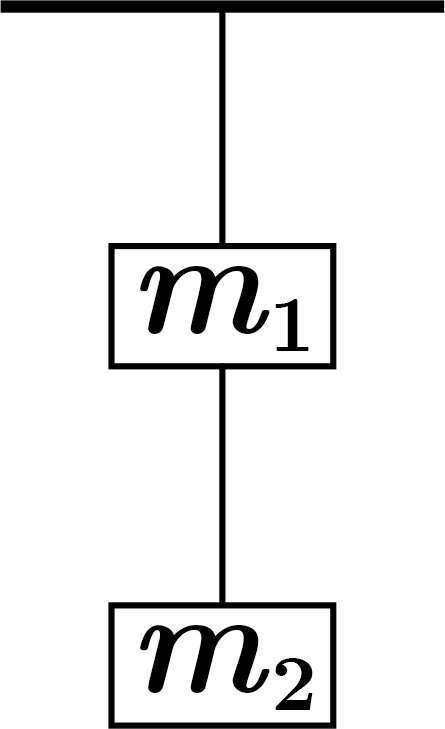
<style>
.page{position:relative;width:445px;height:729px;background:#ffffff}
.page>*{position:absolute;margin:0}
.t1{font:144px "CMUSerif-BoldItalic";color:#000000}
.t2{font:80px "CMUSerif-Bold";color:#000000}
</style>
<div class="page">
<p class="t1" style="left:140px;top:266px;width:130px;height:68px">m</p>
<p class="t2" style="left:275px;top:299px;width:34px;height:52px">1</p>
<p class="t1" style="left:140px;top:625px;width:130px;height:68px">m</p>
<p class="t2" style="left:275px;top:658px;width:38px;height:52px">2</p>
</div>
